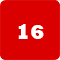
<style>
.page{position:relative;width:60px;height:60px;background:#db0000}
.page>*{position:absolute;margin:0}
.t1{font:20.8px "Rockwell-ExtraBold";color:#ffffff}
</style>
<div class="page">
<p class="t1" style="left:18px;top:24px;width:26px;height:15px">16</p>
</div>
